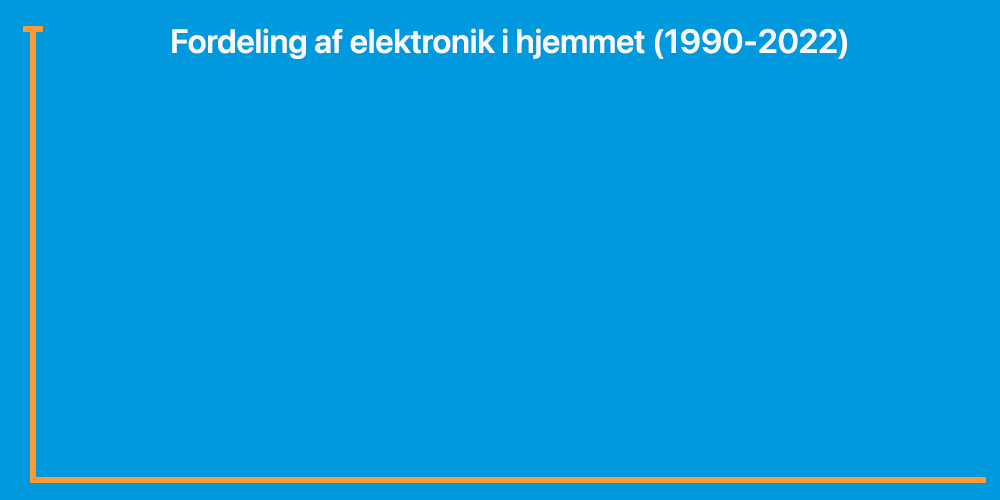
<style>
.page{position:relative;width:1000px;height:500px;background:#0099dd}
.page>*{position:absolute;margin:0}
.t1{font:33.3px "SFPro-Semibold";color:#f8f8f8}
</style>
<div class="page">
<p class="t1" style="left:172px;top:28px;width:675px;height:31px">Fordeling af elektronik i hjemmet (1990-2022)</p>
</div>
